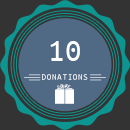
<style>
.page{position:relative;width:130px;height:130px;background:#506a85}
.page>*{position:absolute;margin:0}
.t1{font:33.5px "UbuntuMono-Regular";color:#ffffff}
.t2{font:8.7px "UbuntuMono-Regular";letter-spacing:0.1em;color:#ffffff}
</style>
<div class="page">
<p class="t1" style="left:50px;top:41px;width:30px;height:20px">10</p>
<p class="t2" style="left:42px;top:74px;width:46px;height:6px">DONATIONS</p>
</div>
